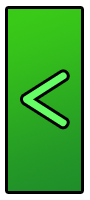
<style>
.page{position:relative;width:90px;height:200px}
.page>*{position:absolute;margin:0}
.t1{font:83.3px "wearealien!!";color:#65ff65}
</style>
<div class="page">
<p class="t1" style="left:23px;top:72px;width:44px;height:55px">&lt;</p>
</div>
